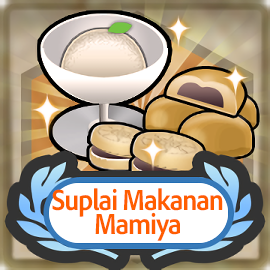
<style>
.page{position:relative;width:270px;height:270px}
.page>*{position:absolute;margin:0}
.t1{font:30px/24px "AdobeClean-Bold";letter-spacing:-0.04em;color:#ff5d00;scale:0.9 1}
</style>
<div class="page">
<p class="t1" style="left:52px;top:188px;width:171px;height:53px;text-align:center">Suplai Makanan<br>Mamiya</p>
</div>
